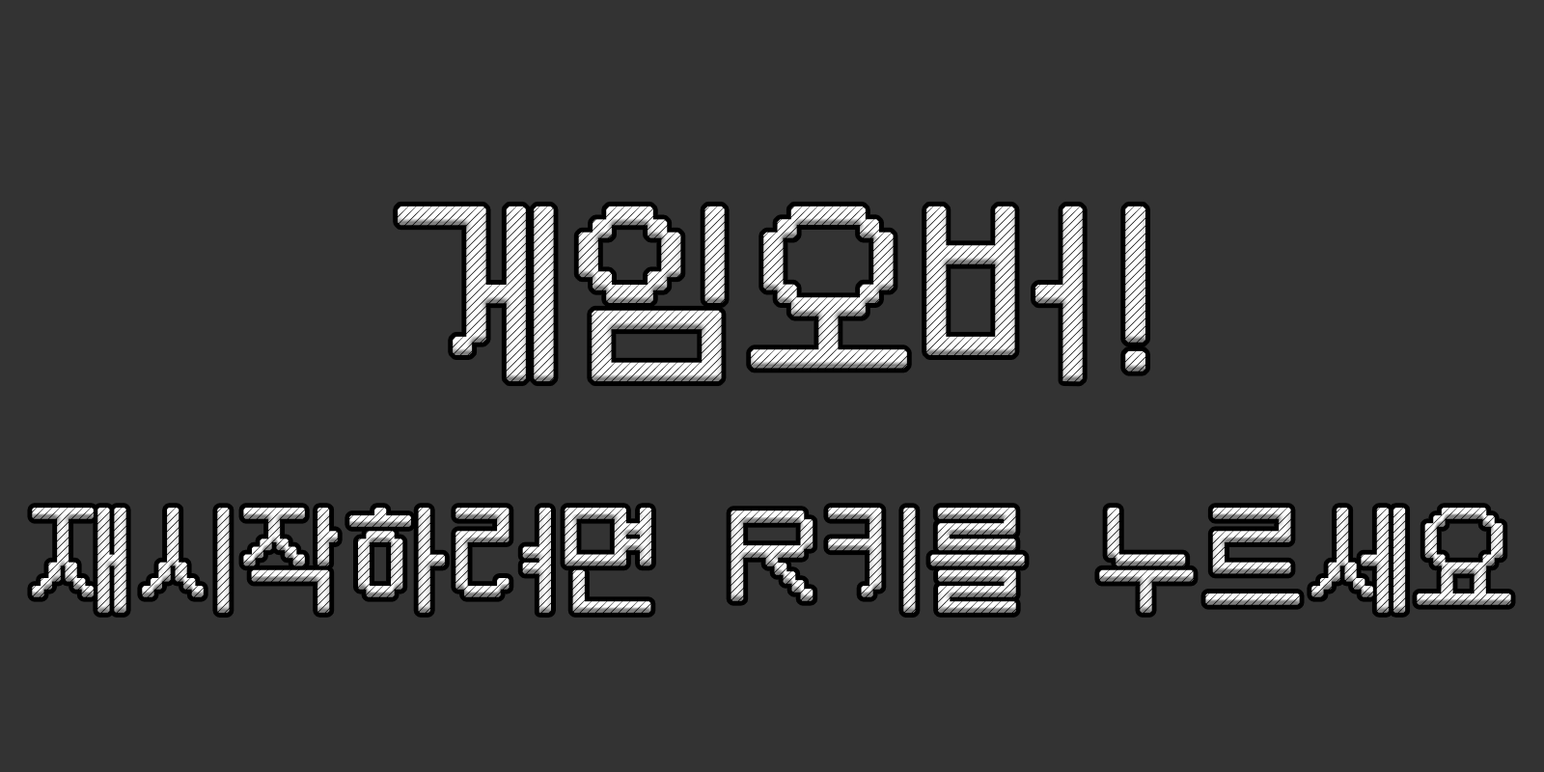
<style>
.page{position:relative;width:1544px;height:772px;background:#333333}
.page>*{position:absolute;margin:0}
.t1{font:201.1px "PFStardust";font-weight:bold}
.t2{font:120.6px "PFStardust";font-weight:bold}
</style>
<div class="page">
<p class="t1" style="left:398px;top:206px;width:748px;height:176px">게임오버!</p>
<p class="t2" style="left:32px;top:508px;width:1479px;height:105px">재시작하려면 R키를 누르세요</p>
</div>
